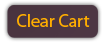
<style>
.page{position:relative;width:104px;height:42px}
.page>*{position:absolute;margin:0}
.t1{font:18px "MyriadPro-Regular";color:#ffae00}
</style>
<div class="page">
<p class="t1" style="left:17px;top:14px;width:73px;height:13px">Clear Cart</p>
</div>
